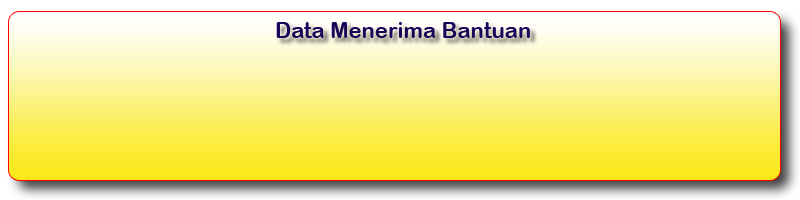
<style>
.page{position:relative;width:800px;height:200px}
.page>*{position:absolute;margin:0}
.t1{font:22px "ArialRoundedMTBold";color:#190659}
</style>
<div class="page">
<p class="t1" style="left:276px;top:22px;width:254px;height:16px">Data Menerima Bantuan</p>
</div>
